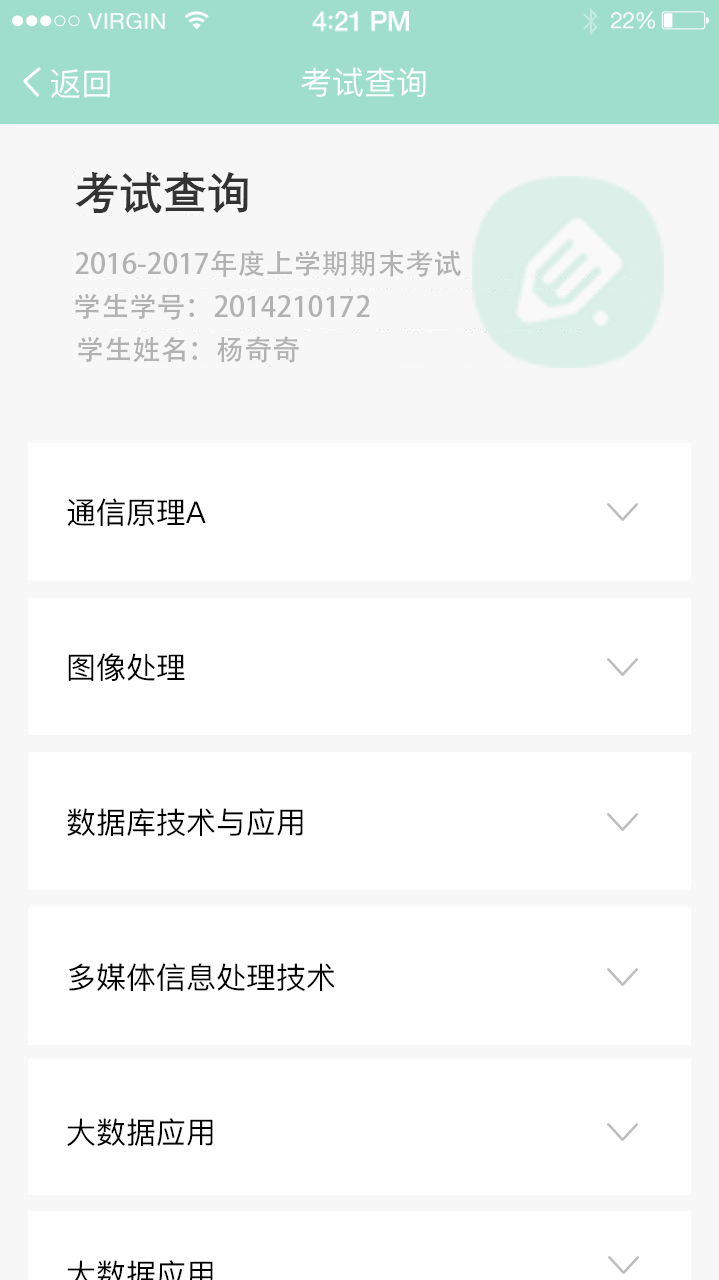
<style>
.page{position:relative;width:719px;height:1280px;background:#ffffff}
.page>*{position:absolute;margin:0}
.t1{font:22.5px "HelveticaNeue";letter-spacing:0.02em;color:#ffffff}
.t2{font:27px "HelveticaNeue-Medium";letter-spacing:-0.02em;color:#ffffff}
.t3{font:27px "Avenir-Medium";letter-spacing:-0.02em;color:#ffffff}
.t4{font:22.6px "HelveticaNeue";letter-spacing:-0.02em;color:#ffffff}
.t5{font:32px "PingFangSC-Medium";color:#ffffff}
.t6{font:44px "DengXian-Bold";color:#333333}
.t7{font:28px "AdobeHeitiStd-Regular";color:#b2b2b2}
.t8{font:30px "PingFangSC-Medium";color:#000000}
</style>
<div class="page">
<p class="t1" style="left:87px;top:13px;width:78px;height:16px">VIRGIN</p>
<p class="t2" style="left:312px;top:11px;width:97px;height:21px">4<span class="t3">:</span>21 PM</p>
<p class="t4" style="left:611px;top:11px;width:44px;height:18px">22%</p>
<p class="t5" style="left:51px;top:69px;width:59px;height:30px">返回</p>
<p class="t5" style="left:301px;top:67px;width:125px;height:30px">考试查询</p>
<p class="t6" style="left:75px;top:172px;width:173px;height:41px">考试查询</p>
<p class="t7" style="left:75px;top:250px;width:386px;height:27px">2016-2017年度上学期期末考试</p>
<p class="t7" style="left:75px;top:293px;width:295px;height:27px">学生学号：2014210172</p>
<p class="t7" style="left:78px;top:336px;width:221px;height:27px">学生姓名：杨奇奇</p>
<p class="t8" style="left:67px;top:498px;width:139px;height:28px">通信原理A</p>
<p class="t8" style="left:68px;top:653px;width:117px;height:28px">图像处理</p>
<p class="t8" style="left:67px;top:808px;width:236px;height:28px">数据库技术与应用</p>
<p class="t8" style="left:69px;top:963px;width:266px;height:28px">多媒体信息处理技术</p>
<p class="t8" style="left:67px;top:1118px;width:146px;height:28px">大数据应用</p>
</div>
